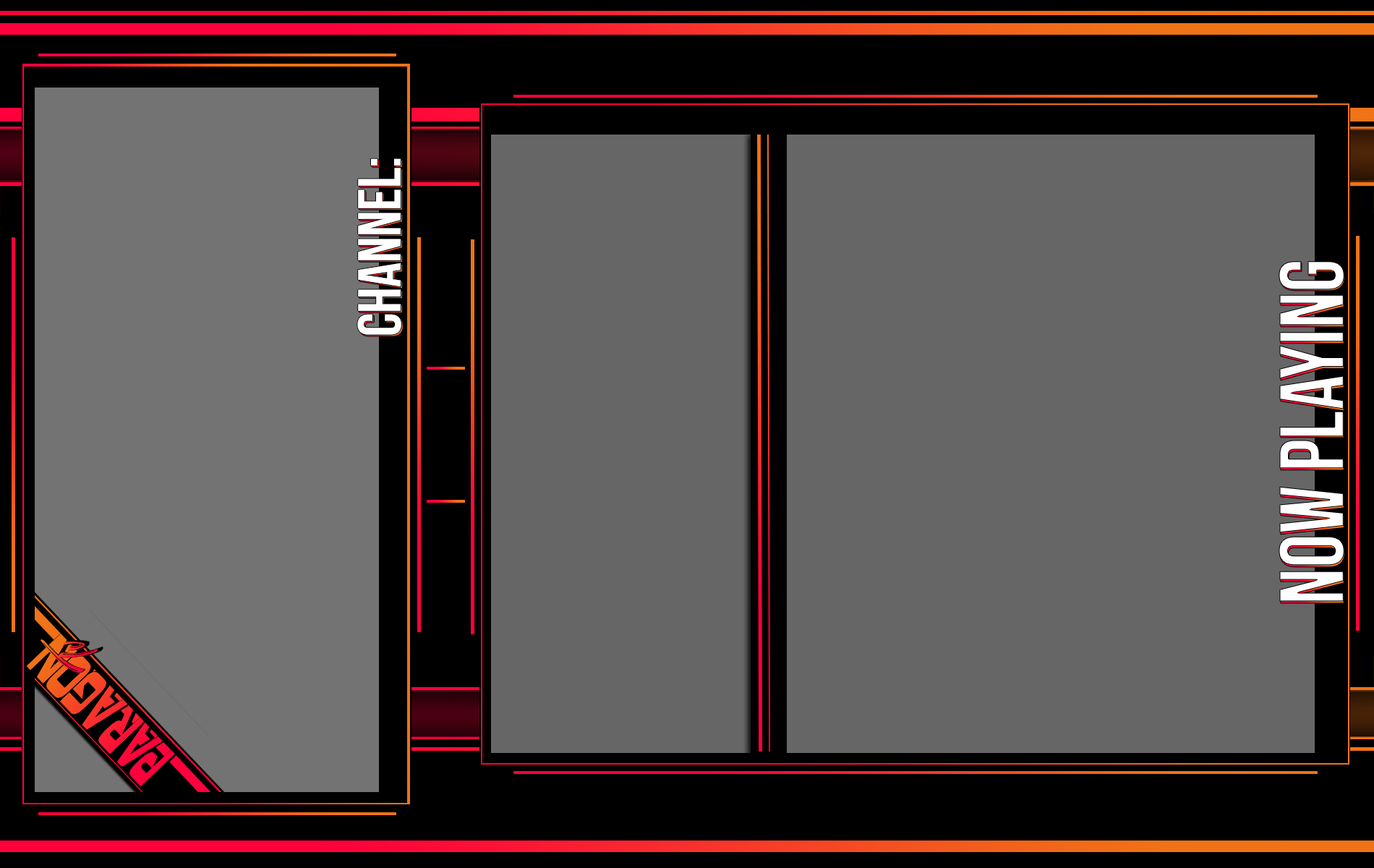
<style>
.page{position:relative;width:1374px;height:868px;background:#666666}
.page>*{position:absolute;margin:0}
.t1{font:60.7px "BebasNeue-Regular";color:#ffffff}
.t2{font:91.1px "BebasNeue-Regular";color:#ffffff;scale:0.95 1}
</style>
<div class="page">
<p class="t1" style="left:357px;top:158px;width:44px;height:177px;rotate:-90deg">channel:</p>
<p class="t1" style="left:359px;top:160px;width:44px;height:176px;rotate:-90deg">channel:</p>
<p class="t2" style="left:1279px;top:261px;width:65px;height:341px;rotate:-90deg">now playing</p>
<p class="t2" style="left:1279px;top:263px;width:66px;height:341px;rotate:-90deg">now playing</p>
</div>
